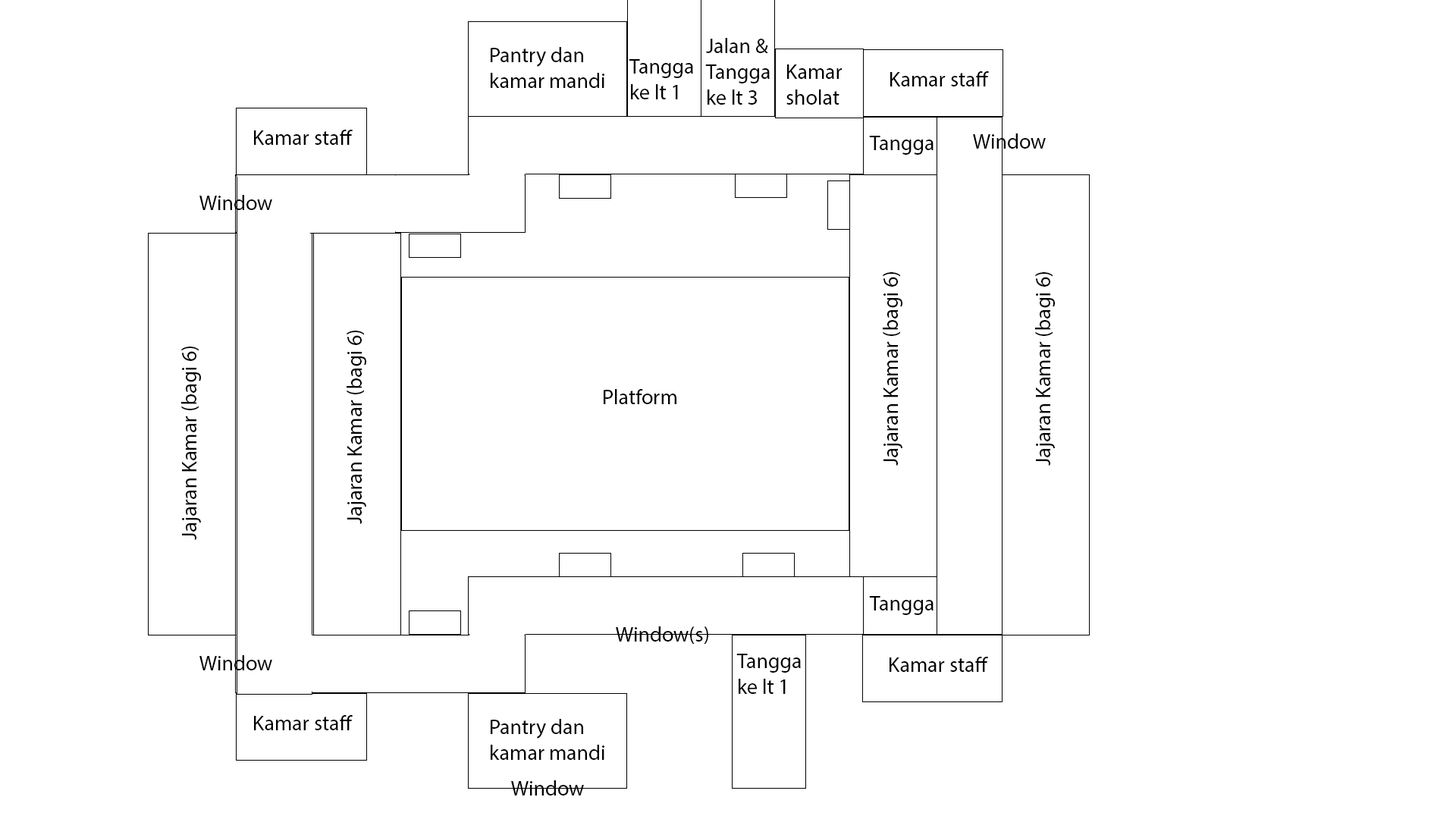
<style>
.page{position:relative;width:1456px;height:819px;background:#ffffff}
.page>*{position:absolute;margin:0}
.t1{font:21.2px "MyriadPro-Regular";color:#000000}
</style>
<div class="page">
<p class="t1" style="left:705px;top:38px;width:65px;height:67px">Jalan &amp; <br>Tangga<br>ke lt 3</p>
<p class="t1" style="left:491px;top:47px;width:113px;height:41px">Pantry dan <br>kamar mandi</p>
<p class="t1" style="left:629px;top:59px;width:64px;height:40px">Tangga<br>ke lt 1</p>
<p class="t1" style="left:786px;top:64px;width:56px;height:41px">Kamar <br>sholat</p>
<p class="t1" style="left:890px;top:71px;width:99px;height:15px">Kamar staff</p>
<p class="t1" style="left:254px;top:130px;width:99px;height:15px">Kamar staff</p>
<p class="t1" style="left:869px;top:136px;width:64px;height:19px">Tangga</p>
<p class="t1" style="left:973px;top:133px;width:73px;height:16px">Window</p>
<p class="t1" style="left:199px;top:195px;width:73px;height:15px">Window</p>
<p class="t1" style="left:883px;top:272px;width:19px;height:194px;rotate:-90deg">Jajaran Kamar (bagi 6)</p>
<p class="t1" style="left:1035px;top:272px;width:20px;height:194px;rotate:-90deg">Jajaran Kamar (bagi 6)</p>
<p class="t1" style="left:347px;top:331px;width:19px;height:193px;rotate:-90deg">Jajaran Kamar (bagi 6)</p>
<p class="t1" style="left:181px;top:347px;width:20px;height:193px;rotate:-90deg">Jajaran Kamar (bagi 6)</p>
<p class="t1" style="left:604px;top:389px;width:72px;height:15px">Platform</p>
<p class="t1" style="left:869px;top:596px;width:64px;height:19px">Tangga</p>
<p class="t1" style="left:616px;top:626px;width:92px;height:18px">Window(s)</p>
<p class="t1" style="left:736px;top:654px;width:65px;height:40px">Tangga<br>ke lt 1</p>
<p class="t1" style="left:199px;top:655px;width:73px;height:15px">Window</p>
<p class="t1" style="left:890px;top:657px;width:98px;height:15px">Kamar staff</p>
<p class="t1" style="left:254px;top:715px;width:99px;height:15px">Kamar staff</p>
<p class="t1" style="left:491px;top:719px;width:113px;height:41px">Pantry dan <br>kamar mandi</p>
<p class="t1" style="left:511px;top:780px;width:73px;height:15px">Window</p>
</div>
